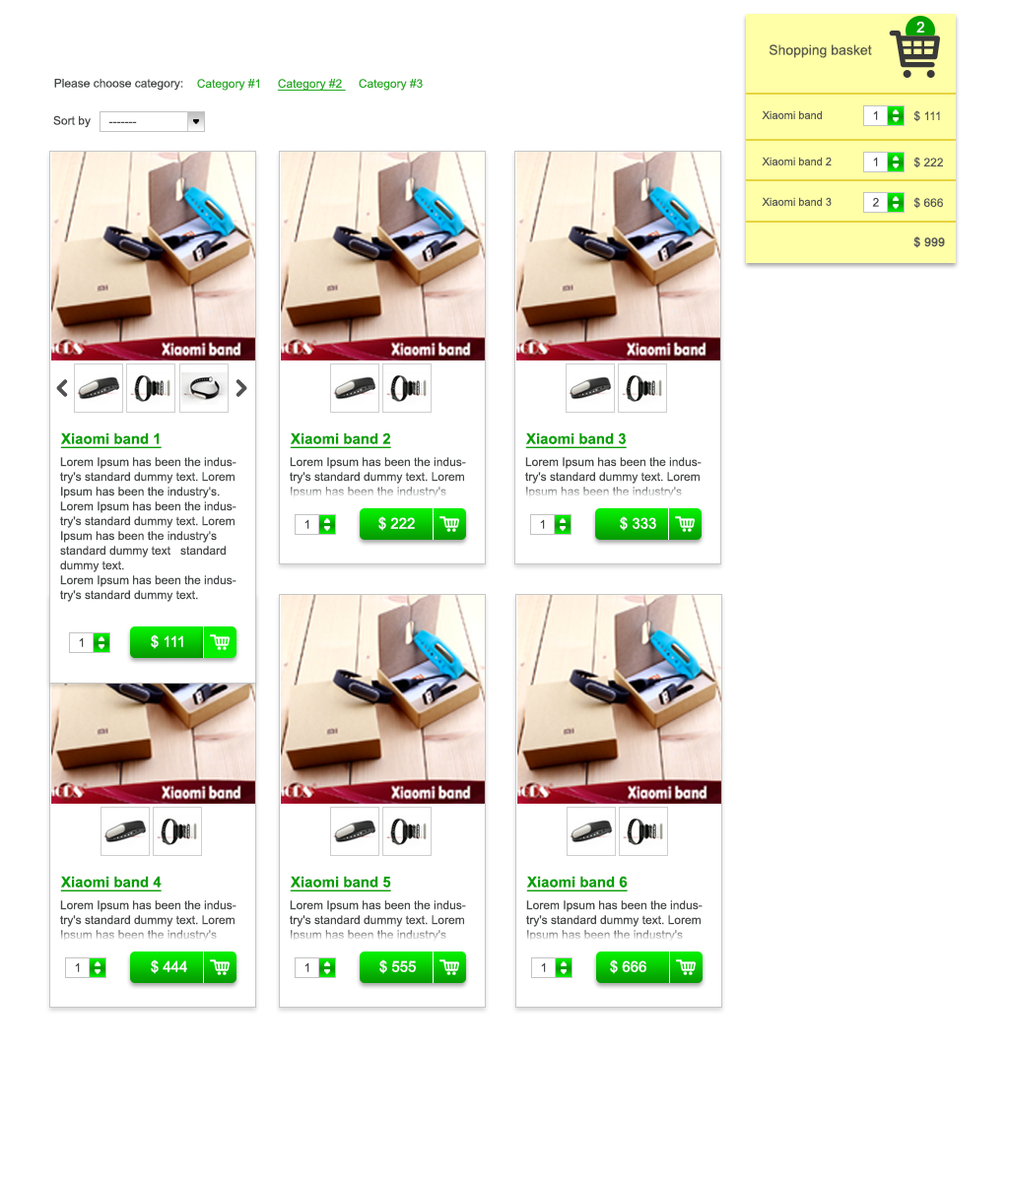
<style>
.page{position:relative;width:1009px;height:1182px;background:#ffffff}
.page>*{position:absolute;margin:0}
.t1{font:14.8px "ArialMT";color:#ffffff}
.t2{font:13.8px "ArialMT";color:#59594b}
.t3{font:11.8px "ArialMT";color:#454748}
.t4{font:11.8px "ArialMT";color:#23ab20}
.t5{font:11.8px "ArialMT";color:#23ab20;text-decoration:underline}
.t6{font:10.8px "ArialMT";color:#565758}
.t7{font:11.8px "ArialMT";color:#565758}
.t8{font:11.8px "ArialMT";color:#565758;font-weight:bold}
.t9{font:14.8px "Arial-BoldMT";color:#05a101;text-decoration:underline}
.t10{font:11.8px/14.8px "ArialMT";color:#454748}
.t11{font:14.8px "ArialMT";color:#fefefe}
</style>
<div class="page">
<p class="t1" style="left:916px;top:22px;width:8px;height:11px">2</p>
<p class="t2" style="left:768px;top:44px;width:104px;height:14px">Shopping basket</p>
<p class="t3" style="left:54px;top:79px;width:129px;height:12px">Please choose category:</p>
<p class="t4" style="left:197px;top:79px;width:226px;height:12px">Category #1     <span class="t5">Category #2 </span>    Category #3</p>
<p class="t6" style="left:761px;top:110px;width:61px;height:9px">Xiaomi band</p>
<p class="t3" style="left:873px;top:110px;width:5px;height:10px">1</p>
<p class="t7" style="left:913px;top:110px;width:27px;height:12px">$ 111</p>
<p class="t3" style="left:53px;top:115px;width:38px;height:13px">Sort by</p>
<p class="t3" style="left:108px;top:121px;width:29px;height:2px">-------</p>
<p class="t6" style="left:761px;top:157px;width:70px;height:8px">Xiaomi band 2</p>
<p class="t3" style="left:873px;top:157px;width:5px;height:9px">1</p>
<p class="t7" style="left:913px;top:157px;width:30px;height:11px">$ 222</p>
<p class="t6" style="left:761px;top:197px;width:70px;height:9px">Xiaomi band 3</p>
<p class="t3" style="left:872px;top:197px;width:7px;height:10px">2</p>
<p class="t7" style="left:913px;top:197px;width:30px;height:12px">$ 666</p>
<p class="t8" style="left:913px;top:236px;width:32px;height:12px">$ 999</p>
<p class="t9" style="left:60px;top:432px;width:102px;height:16px">Xiaomi band 1</p>
<p class="t9" style="left:290px;top:432px;width:101px;height:16px">Xiaomi band 2</p>
<p class="t9" style="left:525px;top:432px;width:102px;height:16px">Xiaomi band 3</p>
<p class="t10" style="left:60px;top:457px;width:176px;height:145px">Lorem Ipsum has been the industry's standard dummy text. Lorem Ipsum has been the industry's. Lorem Ipsum has been the industry's standard dummy text. Lorem Ipsum has been the industry's standard dummy text   standard dummy text.<br>Lorem Ipsum has been the industry's standard dummy text.</p>
<p class="t10" style="left:290px;top:457px;width:176px;height:41px">Lorem Ipsum has been the industry's standard dummy text. Lorem Ipsum has been the industry's standard dummy text</p>
<p class="t10" style="left:525px;top:457px;width:176px;height:41px">Lorem Ipsum has been the industry's standard dummy text. Lorem Ipsum has been the industry's standard dummy text</p>
<p class="t3" style="left:304px;top:519px;width:5px;height:10px">1</p>
<p class="t11" style="left:378px;top:516px;width:37px;height:15px">$ 222</p>
<p class="t3" style="left:540px;top:519px;width:5px;height:10px">1</p>
<p class="t11" style="left:620px;top:516px;width:36px;height:15px">$ 333</p>
<p class="t3" style="left:79px;top:637px;width:5px;height:10px">1</p>
<p class="t11" style="left:151px;top:634px;width:32px;height:15px">$ 111</p>
<p class="t9" style="left:60px;top:876px;width:102px;height:16px">Xiaomi band 4</p>
<p class="t9" style="left:290px;top:876px;width:101px;height:16px">Xiaomi band 5</p>
<p class="t9" style="left:526px;top:876px;width:102px;height:16px">Xiaomi band 6</p>
<p class="t10" style="left:60px;top:900px;width:176px;height:42px">Lorem Ipsum has been the industry's standard dummy text. Lorem Ipsum has been the industry's standard dummy text</p>
<p class="t10" style="left:290px;top:900px;width:176px;height:42px">Lorem Ipsum has been the industry's standard dummy text. Lorem Ipsum has been the industry's standard dummy text</p>
<p class="t10" style="left:526px;top:900px;width:176px;height:42px">Lorem Ipsum has been the industry's standard dummy text. Lorem Ipsum has been the industry's standard dummy text</p>
<p class="t3" style="left:75px;top:962px;width:5px;height:10px">1</p>
<p class="t11" style="left:151px;top:959px;width:36px;height:15px">$ 444</p>
<p class="t3" style="left:304px;top:962px;width:5px;height:10px">1</p>
<p class="t11" style="left:379px;top:959px;width:37px;height:15px">$ 555</p>
<p class="t3" style="left:541px;top:962px;width:5px;height:10px">1</p>
<p class="t11" style="left:610px;top:959px;width:36px;height:15px">$ 666</p>
</div>
